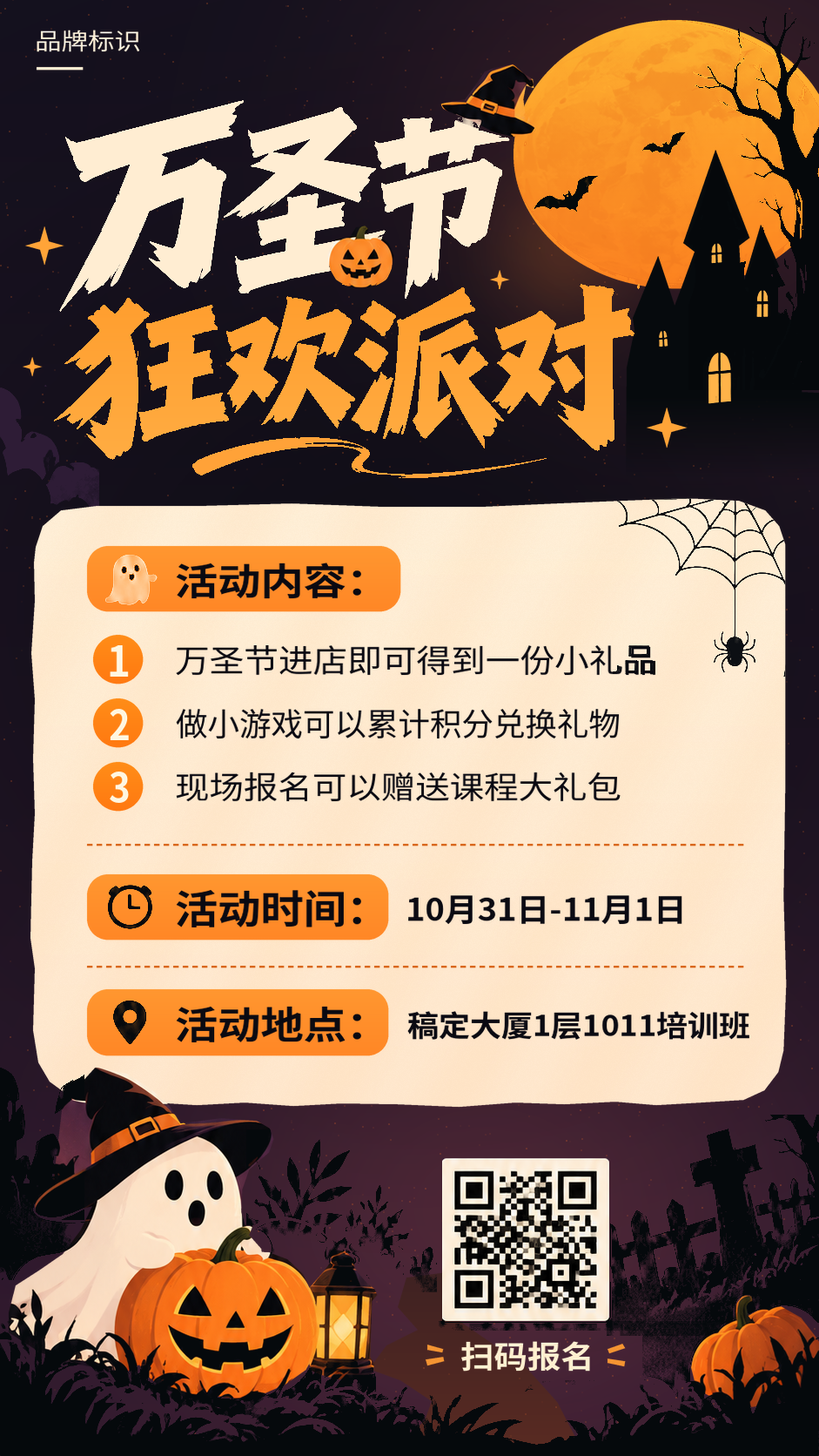
<style>
.page{position:relative;width:819px;height:1456px}
.page>*{position:absolute;margin:0}
.t1{font:22.6px "NotoSansCJKsc-Regular";color:#fff0d7;scale:1.17 1}
.t2{font:36.6px "NotoSansCJKsc-Bold";color:#090911;scale:1.17 1}
.t3{font:41.8px "NotoSansCJKsc-Bold";color:#fff6e1;scale:0.96 1}
.t4{font:31.3px "NotoSansCJKsc-Regular";color:#090911;scale:1.1 1}
.t5{font:40.6px "NotoSansCJKsc-Bold";color:#fff6e1;scale:0.9 1}
.t6{font:31.3px "NotoSansCJKsc-Regular";color:#090911}
.t7{font:39.4px "NotoSansCJKsc-Bold";color:#fff6e1;scale:0.93 1}
.t8{font:30.5px "NotoSansCJKsc-Regular";color:#090911;scale:1.13 1}
.t9{font:39px "NotoSansCJKsc-Bold";color:#090911;scale:1.1 1}
.t10{font:31.2px "NotoSansCJKsc-Bold";color:#090911;scale:1.06 1}
.t11{font:37.3px "NotoSansCJKsc-Bold";color:#090911;scale:1.15 1}
.t12{font:28.7px "NotoSansCJKsc-Bold";color:#090911;scale:1.09 1}
.t13{font:30.5px "NotoSansCJKsc-Bold";color:#ffefcf;scale:1.1 1}
</style>
<div class="page">
<p class="t1" style="left:37px;top:30px;width:103px;height:22px">品牌标识</p>
<p class="t2" style="left:176px;top:562px;width:185px;height:37px">活动内容：</p>
<p class="t3" style="left:110px;top:645px;width:19px;height:31px">1</p>
<p class="t4" style="left:176px;top:645px;width:480px;height:31px">万圣节进店即可得到一份小礼品</p>
<p class="t5" style="left:110px;top:709px;width:19px;height:31px">2</p>
<p class="t6" style="left:176px;top:709px;width:444px;height:30px">做小游戏可以累计积分兑换礼物</p>
<p class="t7" style="left:110px;top:771px;width:19px;height:32px">3</p>
<p class="t8" style="left:176px;top:771px;width:445px;height:31px">现场报名可以赠送课程大礼包</p>
<p class="t9" style="left:176px;top:890px;width:185px;height:37px">活动时间：</p>
<p class="t10" style="left:408px;top:895px;width:275px;height:30px">10月31日-11月1日</p>
<p class="t11" style="left:176px;top:1006px;width:185px;height:36px">活动地点：</p>
<p class="t12" style="left:407px;top:1011px;width:343px;height:28px">稿定大厦1层1011培训班</p>
<p class="t13" style="left:461px;top:1341px;width:129px;height:30px">扫码报名</p>
</div>
